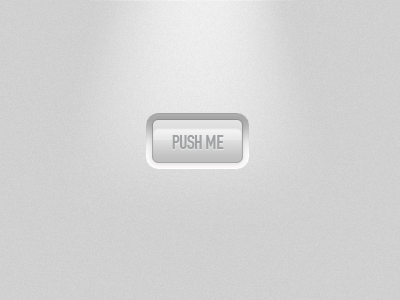
<style>
.page{position:relative;width:400px;height:300px}
.page>*{position:absolute;margin:0}
.t1{font:20.4px "DINEngschrift";color:#a0a2a3;text-transform:uppercase}
</style>
<div class="page">
<p class="t1" style="left:172px;top:135px;width:52px;height:14px">push me</p>
</div>
